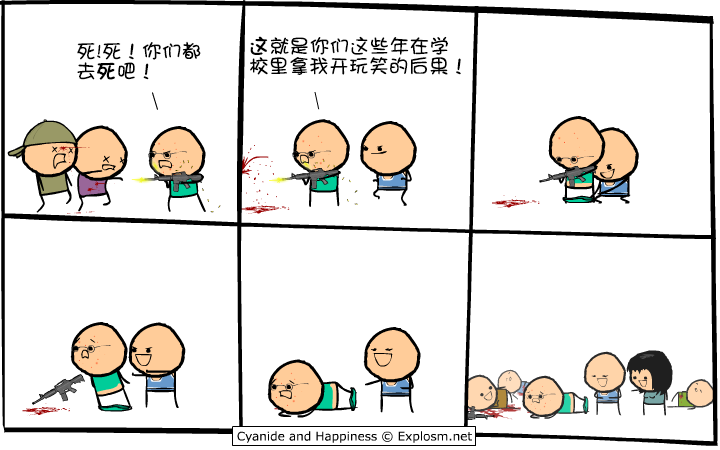
<style>
.page{position:relative;width:720px;height:450px;background:#ffffff}
.page>*{position:absolute;margin:0}
.t1{font:20px/20px "DFGirl";color:#000000}
.t2{font:20px/20px "DFGirl";color:#000000;font-weight:bold}
</style>
<div class="page">
<p class="t1" style="left:77px;top:41px;width:124px;height:39px">死!死！你们都<br>去<span class="t2">死</span>吧！</p>
<p class="t1" style="left:250px;top:36px;width:211px;height:39px"><span class="t2">这</span>就是你们这些年在学<br>校里拿我开玩笑的后果！</p>
</div>
